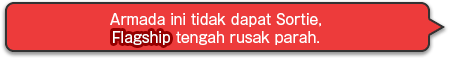
<style>
.page{position:relative;width:450px;height:58px;background:#ed3b3b}
.page>*{position:absolute;margin:0}
.t1{font:14px/18px "GothicMB101Pro-Regular";color:#ffffff}
.t2{font:14px "GothicMB101Pro-Regular";color:#ffffff}
</style>
<div class="page">
<p class="t1" style="left:110px;top:13px;width:211px;height:32px;text-align:center">Armada ini tidak dapat Sortie,<br>Flagship tengah rusak parah.</p>
<p class="t2" style="left:113px;top:31px;width:57px;height:14px">Flagship</p>
</div>
